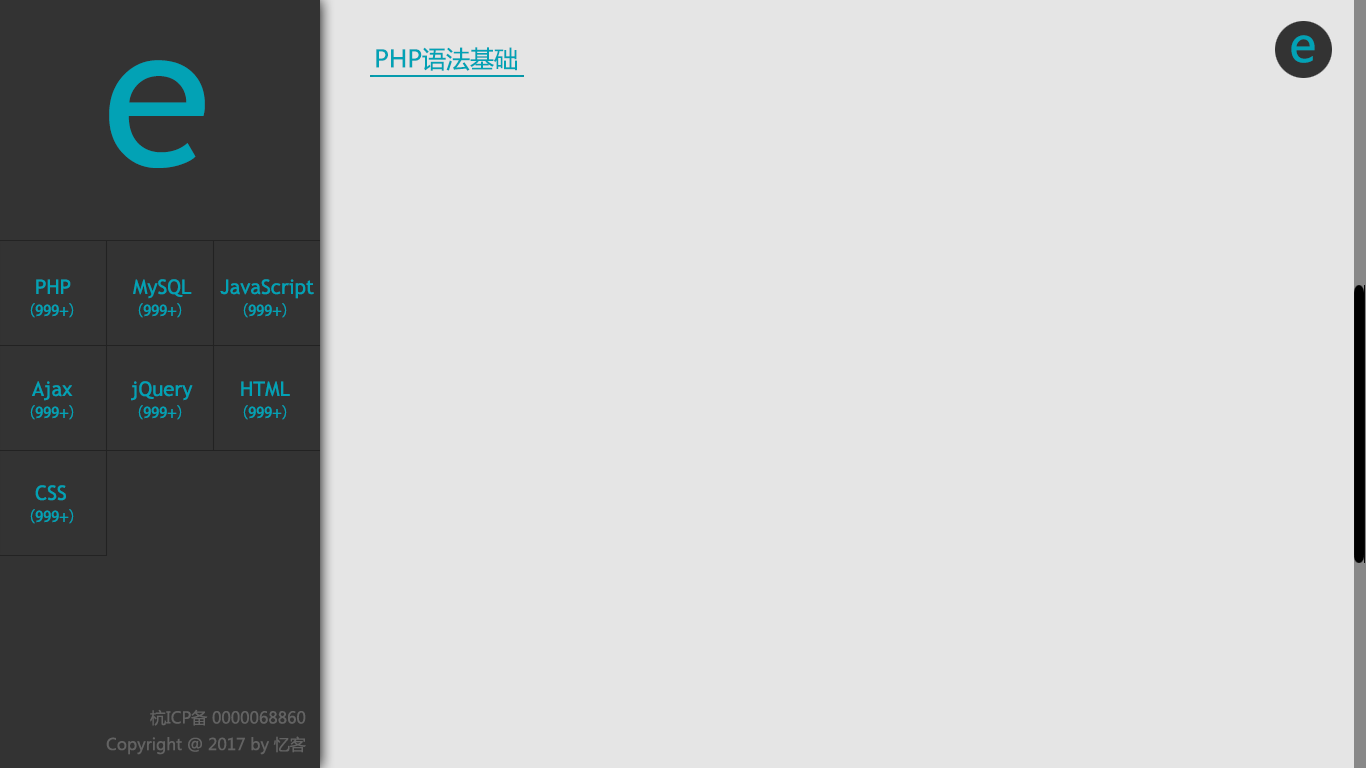
<style>
.page{position:relative;width:1366px;height:768px;background:#e5e5e5}
.page>*{position:absolute;margin:0}
.t1{font:48px "MicrosoftYaHei";color:#02a2b5}
.t2{font:24px "MicrosoftYaHei";color:#02a2b5}
.t3{font:198.3px "TrebuchetMS";color:#02a2b5}
.t4{font:20.1px "TrebuchetMS";color:#02a2b5}
.t5{font:14.6px "AdobeHeitiStd-Regular";color:#02a2b5}
.t6{font:16px "MicrosoftYaHei";color:#636363}
</style>
<div class="page">
<p class="t1" style="left:1291px;top:35px;width:24px;height:28px">e</p>
<p class="t2" style="left:376px;top:47px;width:141px;height:24px">PHP语法基础</p>
<p class="t3" style="left:109px;top:60px;width:96px;height:108px">e</p>
<p class="t4" style="left:36px;top:279px;width:35px;height:15px">PHP</p>
<p class="t4" style="left:133px;top:279px;width:59px;height:20px">MySQL</p>
<p class="t4" style="left:220px;top:279px;width:94px;height:20px">JavaScript</p>
<p class="t5" style="left:30px;top:303px;width:44px;height:15px">（999+）</p>
<p class="t5" style="left:138px;top:303px;width:44px;height:15px">（999+）</p>
<p class="t5" style="left:243px;top:303px;width:44px;height:15px">（999+）</p>
<p class="t4" style="left:32px;top:381px;width:41px;height:20px">Ajax</p>
<p class="t4" style="left:131px;top:381px;width:62px;height:20px">jQuery</p>
<p class="t4" style="left:241px;top:381px;width:49px;height:16px">HTML</p>
<p class="t5" style="left:30px;top:405px;width:44px;height:15px">（999+）</p>
<p class="t5" style="left:138px;top:405px;width:44px;height:15px">（999+）</p>
<p class="t5" style="left:243px;top:405px;width:44px;height:15px">（999+）</p>
<p class="t4" style="left:35px;top:485px;width:31px;height:16px">CSS</p>
<p class="t5" style="left:30px;top:509px;width:44px;height:15px">（999+）</p>
<p class="t6" style="left:150px;top:709px;width:156px;height:17px">杭ICP备 0000068860</p>
<p class="t6" style="left:106px;top:736px;width:200px;height:19px">Copyright @ 2017 by 忆客</p>
</div>
